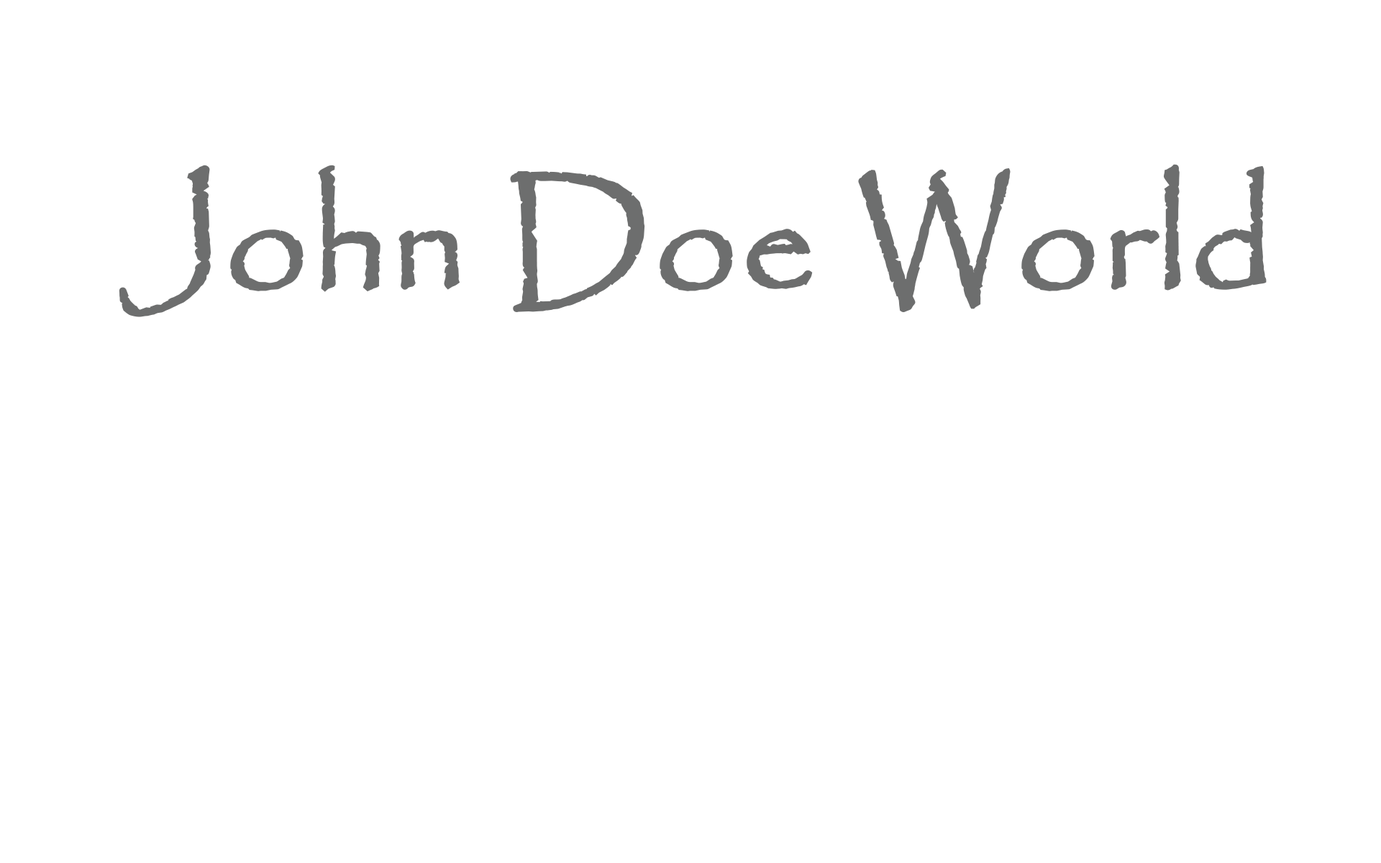
<style>
.page{position:relative;width:1381px;height:863px;background:#ffffff}
.page>*{position:absolute;margin:0}
.t1{font:146.7px "Papyrus-Regular";color:#6d6e6e;font-weight:bold}
</style>
<div class="page">
<p class="t1" style="left:119px;top:164px;width:1148px;height:153px">John Doe World</p>
</div>
